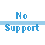
<style>
.page{position:relative;width:45px;height:45px;background:#ffffff}
.page>*{position:absolute;margin:0}
.t1{font:10px "FranklinGothic-Demi";color:#339ed9}
</style>
<div class="page">
<p class="t1" style="left:5px;top:12px;width:34px;height:21px;text-align:center">No<br>Support</p>
</div>
